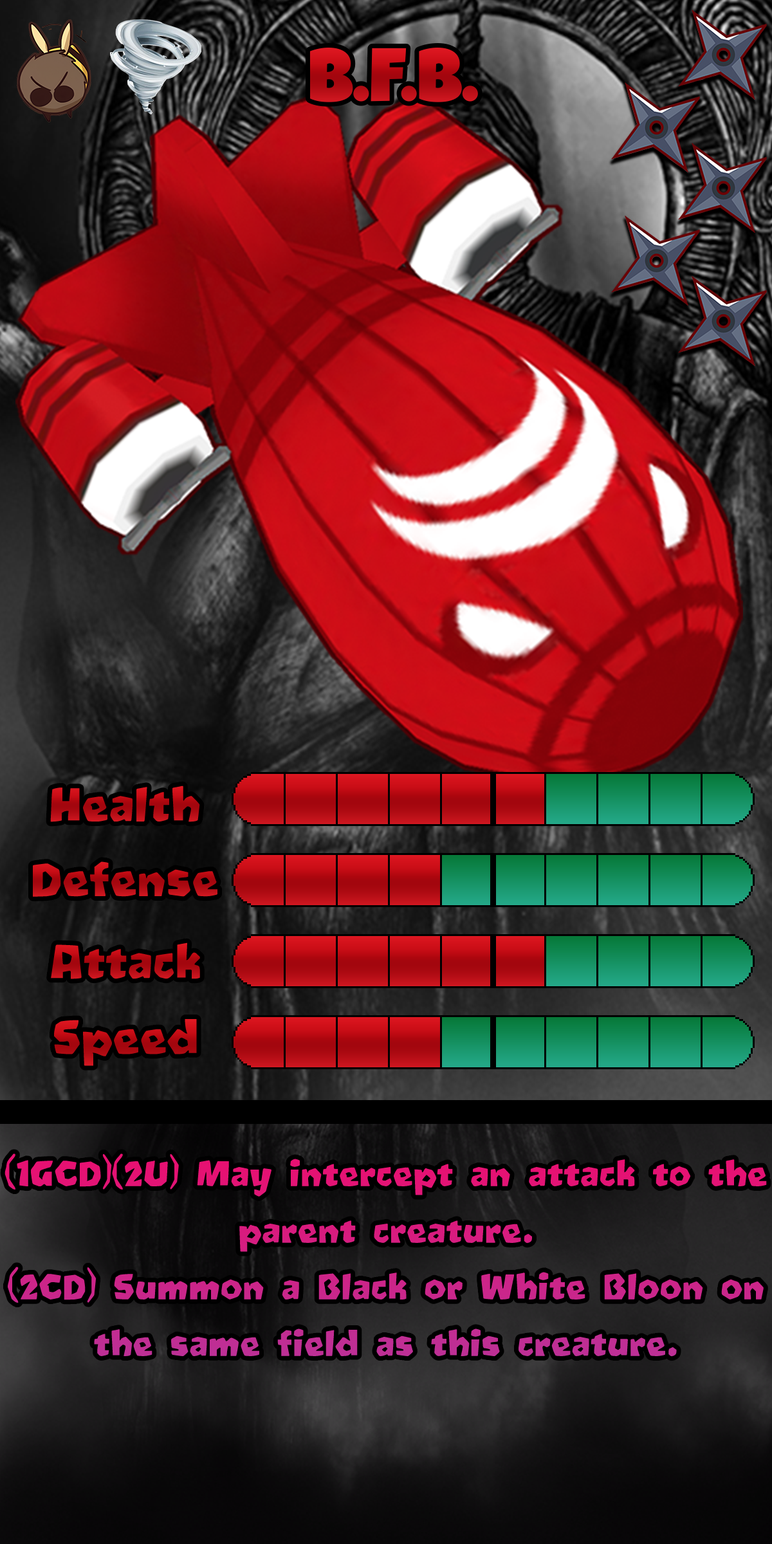
<style>
.page{position:relative;width:772px;height:1544px}
.page>*{position:absolute;margin:0}
.t1{font:128.7px "LuckiestGuy-Regular"}
.t2{font:77.2px "Oetztype";color:#b50a12}
.t3{font:77.2px "Oetztype";color:#b50b13}
.t4{font:77.2px "Oetztype";color:#b50a13}
.t5{font:77.2px "Oetztype";color:#ae0911}
.t6{font:57.9px/56.6px "Oetztype"}
</style>
<div class="page">
<p class="t1" style="left:310px;top:48px;width:168px;height:54px">B.F.B.</p>
<p class="t2" style="left:50px;top:786px;width:150px;height:36px">Health</p>
<p class="t3" style="left:33px;top:862px;width:184px;height:35px">Defense</p>
<p class="t4" style="left:51px;top:943px;width:149px;height:36px">Attack</p>
<p class="t5" style="left:54px;top:1019px;width:143px;height:47px">Speed</p>
<p class="t6" style="left:5px;top:1154px;width:762px;height:203px;text-align:center">(1GCD)(2U) May intercept an attack to the parent creature.<br>(2CD) Summon a Black or White Bloon on the same field as this creature.</p>
</div>
